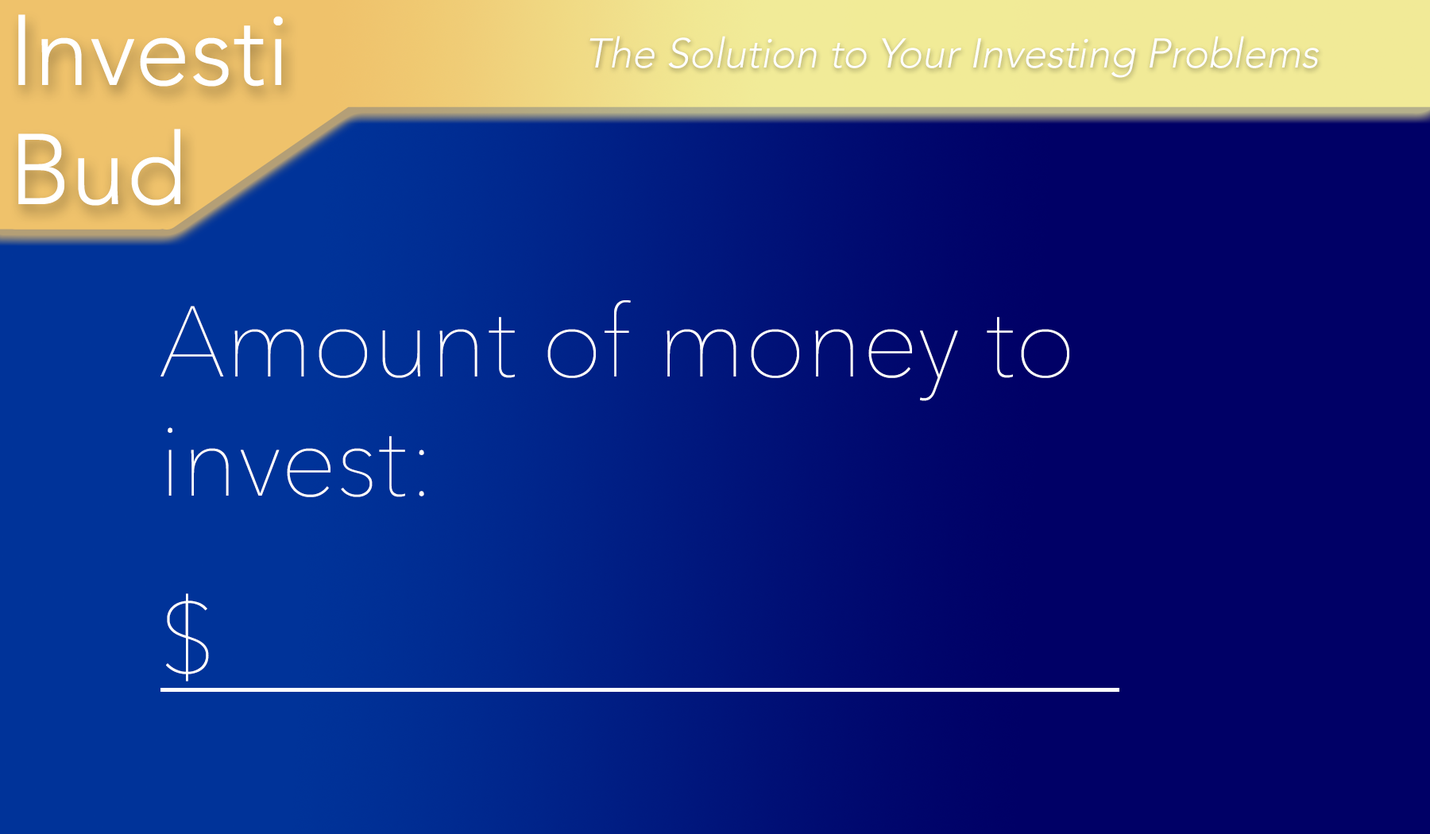
<style>
.page{position:relative;width:1430px;height:834px;background:#000066}
.page>*{position:absolute;margin:0}
.t1{font:99.3px "Avenir-Light";color:#ffffff}
.t2{font:41.4px "Avenir-Light";color:#ffffff;font-style:italic}
.t3{font:99.3px "AvenirNext-UltraLight";color:#ffffff}
</style>
<div class="page">
<p class="t1" style="left:18px;top:14px;width:265px;height:192px">Investi<br>Bud</p>
<p class="t2" style="left:589px;top:36px;width:730px;height:42px">The Solution to Your Investing Problems</p>
<p class="t3" style="left:160px;top:300px;width:909px;height:197px">Amount of money to <br>invest:</p>
<p class="t3" style="left:166px;top:593px;width:43px;height:89px">$</p>
</div>
